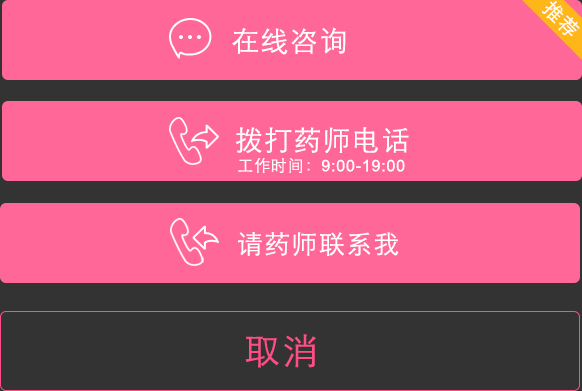
<style>
.page{position:relative;width:582px;height:391px;background:#ff6799}
.page>*{position:absolute;margin:0}
.t1{font:20px "STHeitiSC-Light";letter-spacing:0.05em;color:#fffefe}
.t2{font:28px "STHeitiSC-Light";letter-spacing:0.05em;color:#ffffff}
.t3{font:16px "ArialMT";letter-spacing:0.05em;color:#ffffff}
.t4{font:16px "STHeitiSC-Light";letter-spacing:0.05em;color:#ffffff}
.t5{font:26px "STHeitiSC-Light";letter-spacing:0.05em;color:#ffffff}
.t6{font:36px "STHeitiSC-Light";letter-spacing:0.05em;color:#ff4d85}
</style>
<div class="page">
<p class="t1" style="left:541px;top:0px;width:39px;height:37px;rotate:45deg">推荐</p>
<p class="t2" style="left:232px;top:27px;width:114px;height:28px">在线咨询</p>
<p class="t2" style="left:235px;top:127px;width:174px;height:27px">拨打药师电话</p>
<p class="t3" style="left:238px;top:158px;width:167px;height:15px"><span class="t4">工作时间：</span>9:00-19:00</p>
<p class="t5" style="left:238px;top:232px;width:161px;height:24px">请药师联系我</p>
<p class="t6" style="left:245px;top:334px;width:71px;height:34px">取消</p>
</div>
